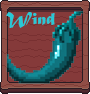
<style>
.page{position:relative;width:90px;height:94px;background:#853a3a}
.page>*{position:absolute;margin:0}
.t1{font:18px "MaturaMTScriptCapitals";color:#28c8d6}
</style>
<div class="page">
<p class="t1" style="left:6px;top:12px;width:49px;height:16px">Wind</p>
</div>
